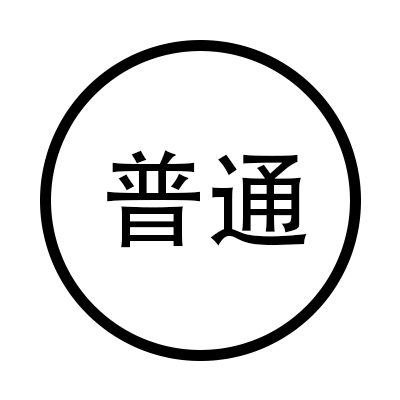
<style>
.page{position:relative;width:400px;height:400px;background:#ffffff}
.page>*{position:absolute;margin:0}
.t1{font:105.8px "AdobeHeitiStd-Regular";color:#000000}
</style>
<div class="page">
<p class="t1" style="left:107px;top:150px;width:200px;height:98px">普通</p>
</div>
